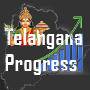
<style>
.page{position:relative;width:90px;height:90px;background:#333333}
.page>*{position:absolute;margin:0}
.t1{font:21.6px "AgencyFB-Bold";letter-spacing:0.025em;color:#ffffff}
</style>
<div class="page">
<p class="t1" style="left:4px;top:28px;width:78px;height:47px">Telangana<br>Progress</p>
</div>
